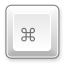
<style>
.page{position:relative;width:64px;height:64px}
.page>*{position:absolute;margin:0}
.t1{font:24px "AppleSymbols";color:#737373}
</style>
<div class="page">
<p class="t1" style="left:21px;top:27px;width:14px;height:15px">⌘</p>
</div>
